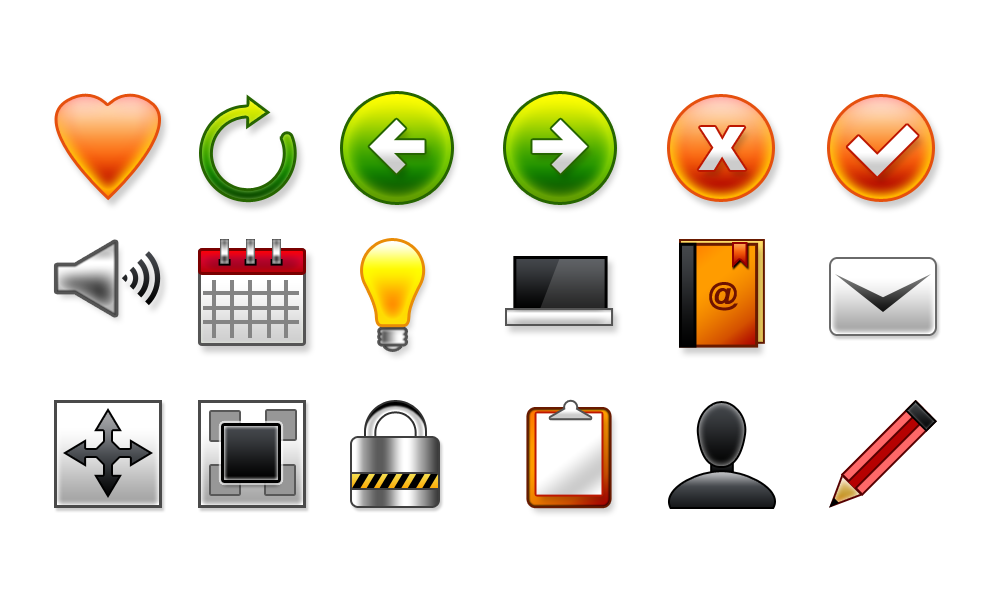
<style>
.page{position:relative;width:1000px;height:600px;background:#ffffff}
.page>*{position:absolute;margin:0}
.t1{font:60px "Arial-Black";color:#fcfcfc}
.t2{font:30px "Arial-BoldMT";color:#6f1200}
</style>
<div class="page">
<p class="t1" style="left:698px;top:127px;width:48px;height:43px">X</p>
<p class="t2" style="left:709px;top:282px;width:29px;height:29px">@</p>
</div>
